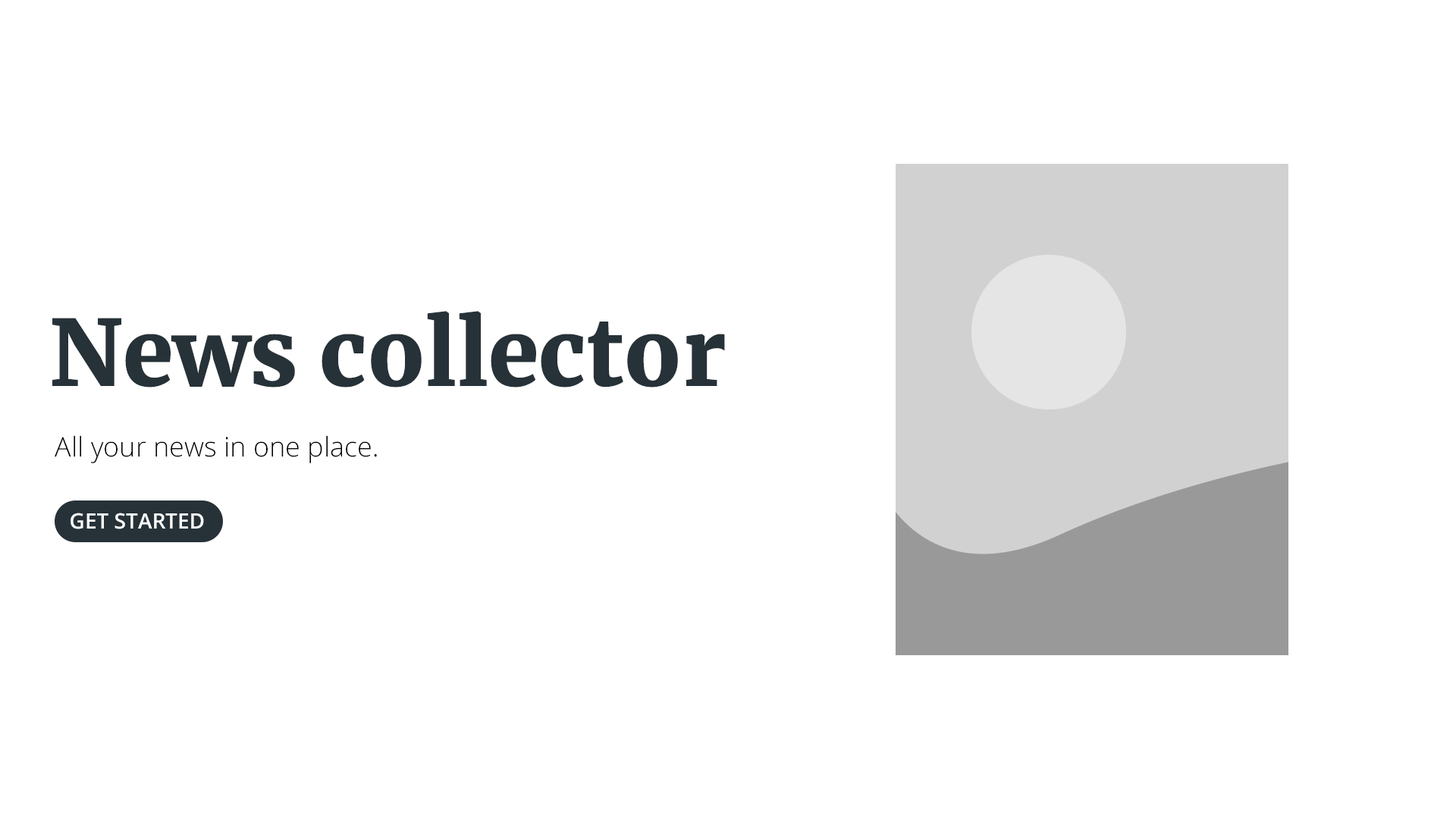
<style>
.page{position:relative;width:1456px;height:819px;background:#ffffff}
.page>*{position:absolute;margin:0}
.t1{font:91.1px "Merriweather-Black";color:#263238}
.t2{font:27.3px "OpenSans-Light";color:#000000}
.t3{font:21.2px "OpenSans-SemiBold";color:#ffffff}
</style>
<div class="page">
<p class="t1" style="left:52px;top:311px;width:673px;height:77px">News collector</p>
<p class="t2" style="left:55px;top:435px;width:322px;height:28px">All your news in one place.</p>
<p class="t3" style="left:71px;top:513px;width:133px;height:16px">GET STARTED</p>
</div>
